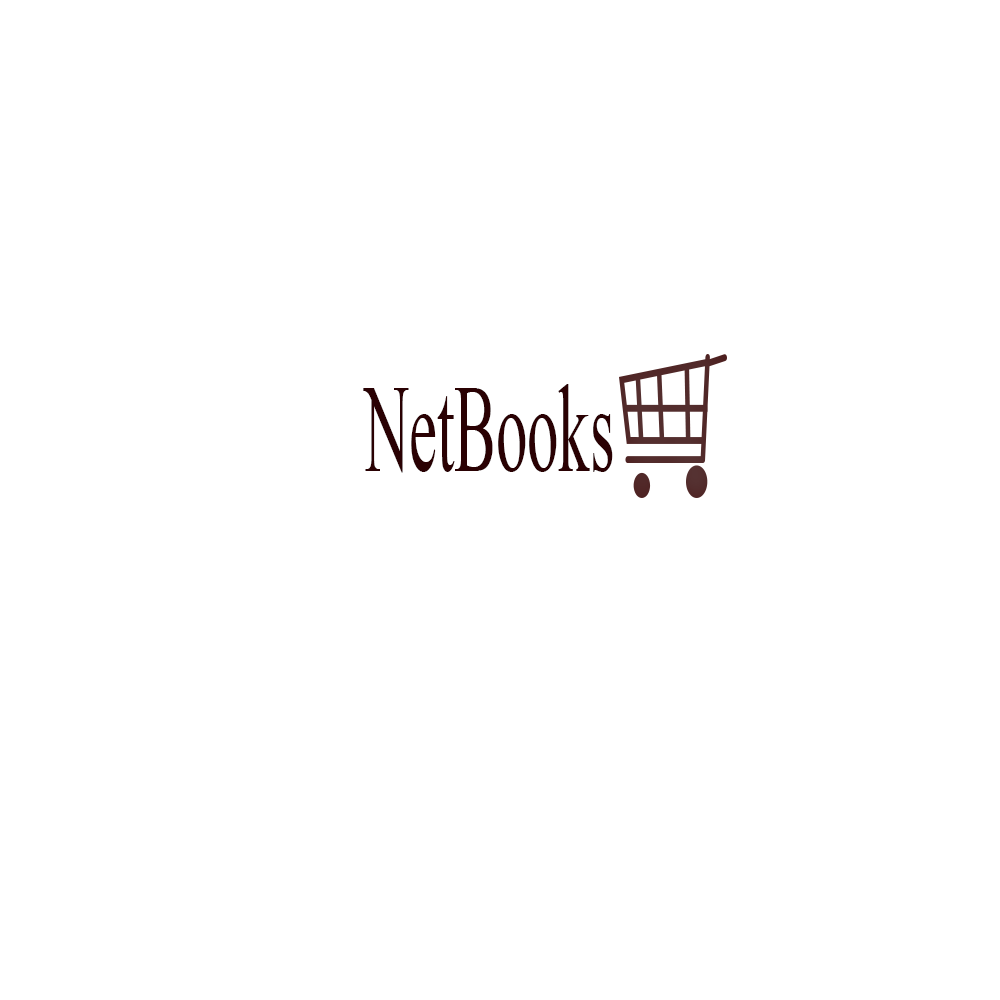
<style>
.page{position:relative;width:1000px;height:1000px;background:#ffffff}
.page>*{position:absolute;margin:0}
.t1{font:125px "TimesNewRomanPSMT";color:#2a0103;scale:0.5 1}
</style>
<div class="page">
<p class="t1" style="left:363px;top:384px;width:250px;height:89px">NetBooks</p>
</div>
